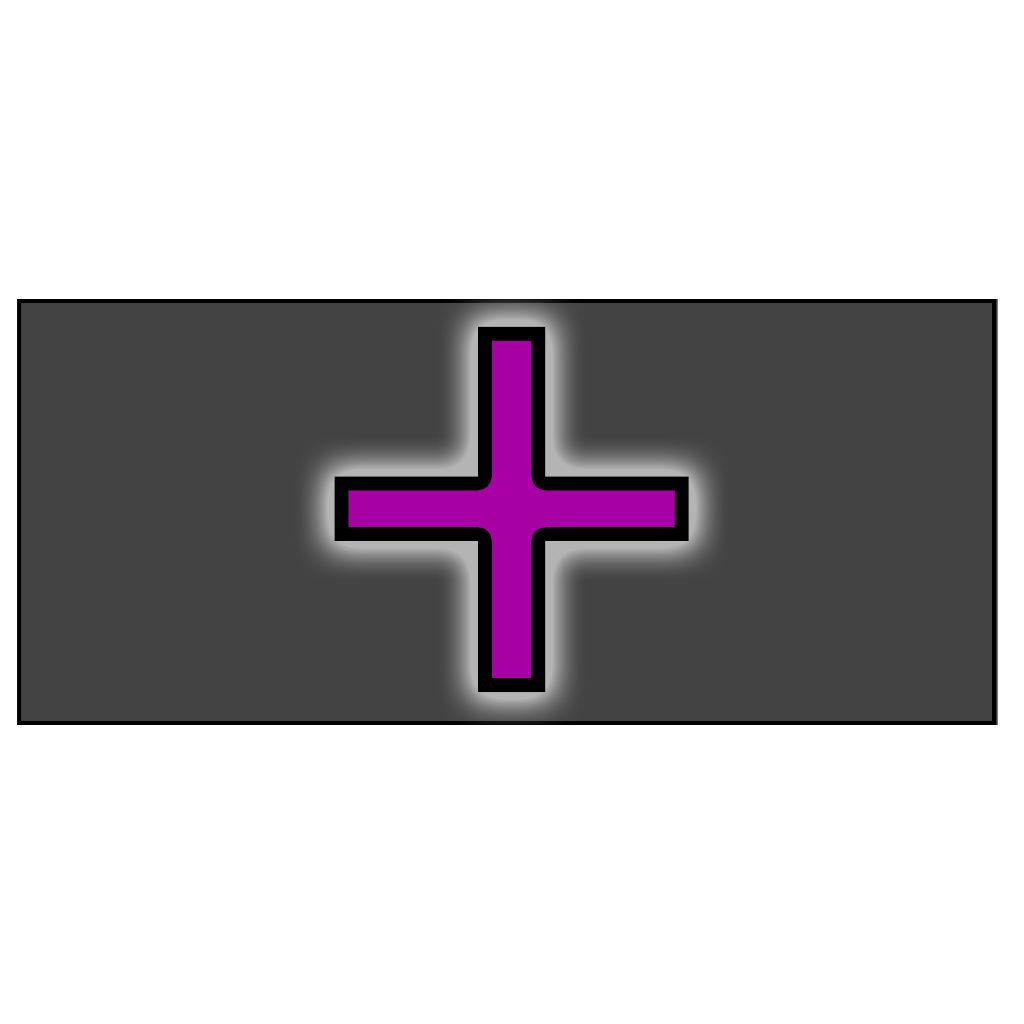
<style>
.page{position:relative;width:1024px;height:1024px;background:#ffffff}
.page>*{position:absolute;margin:0}
.t1{font:686.6px "MyriadPro-Bold"}
</style>
<div class="page">
<p class="t1" style="left:334px;top:326px;width:355px;height:367px">+</p>
</div>
